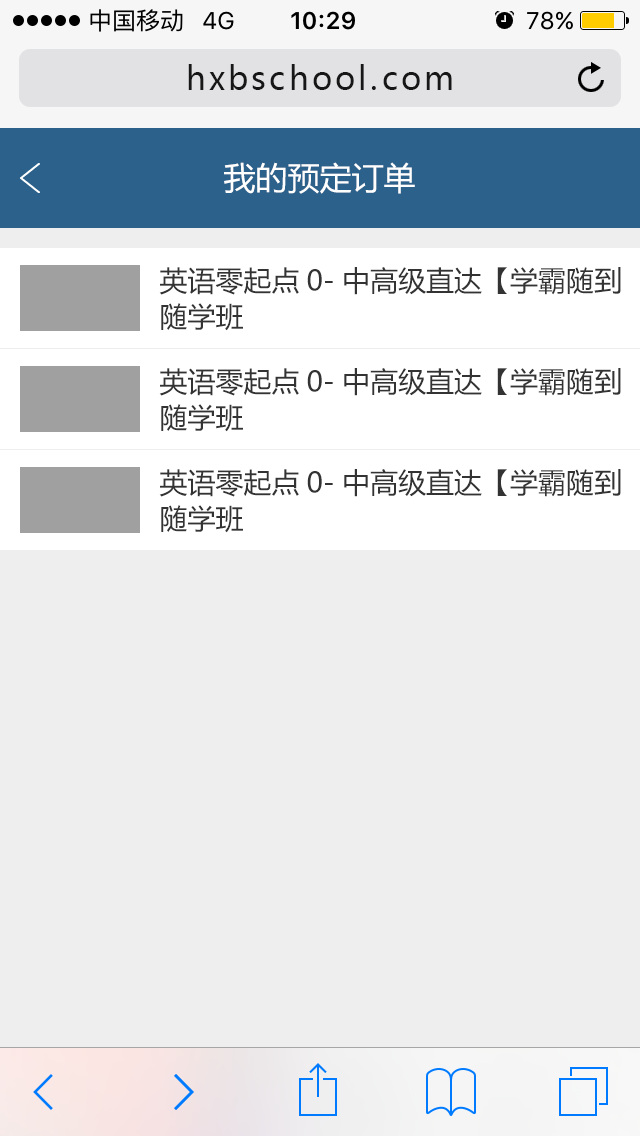
<style>
.page{position:relative;width:640px;height:1136px;background:#eeeeee}
.page>*{position:absolute;margin:0}
.t1{font:32px "MicrosoftYaHei";letter-spacing:0.1em;color:#171717}
.t2{font:32px "MicrosoftYaHei";color:#ffffff}
.t3{font:28px/36px "MicrosoftYaHei";color:#333333}
</style>
<div class="page">
<p class="t1" style="left:188px;top:64px;width:264px;height:26px">hxbschool.com</p>
<p class="t2" style="left:224px;top:162px;width:191px;height:32px">我的预定订单</p>
<p class="t3" style="left:159px;top:267px;width:462px;height:64px">英语零起点0-中高级直达【学霸随到<br>随学班</p>
<p class="t3" style="left:159px;top:368px;width:462px;height:64px">英语零起点0-中高级直达【学霸随到<br>随学班</p>
<p class="t3" style="left:159px;top:469px;width:462px;height:64px">英语零起点0-中高级直达【学霸随到<br>随学班</p>
</div>
